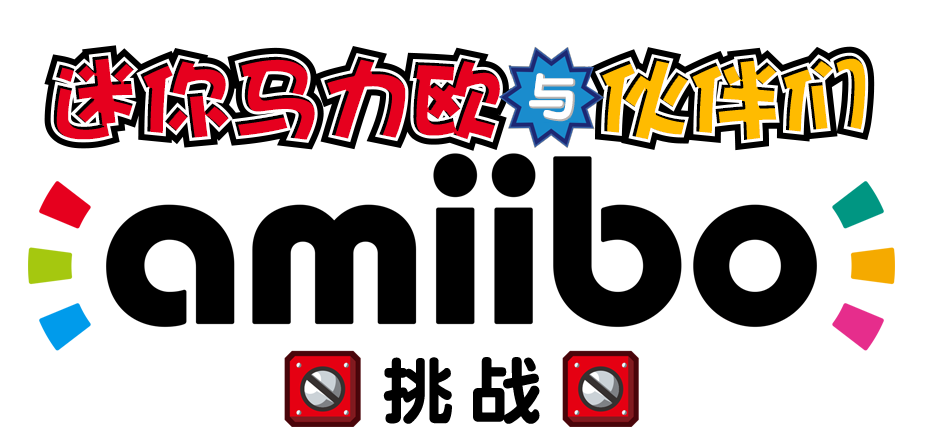
<style>
.page{position:relative;width:932px;height:442px;background:#ffffff}
.page>*{position:absolute;margin:0}
.t1{font:94.7px "DFPHaiBaoW12";letter-spacing:-0.045em;color:#e6001e}
.t2{font:94.7px "DFPHaiBaoW12";letter-spacing:-0.045em;color:#ffbb00}
.t3{font:50.7px "DFPYuanW9";letter-spacing:-0.07em;color:#ffffff}
.t4{font:73.3px "DFPYuanW9";letter-spacing:0.2em;color:#000000}
</style>
<div class="page">
<p class="t1" style="left:53px;top:55px;width:447px;height:85px">迷你马力欧</p>
<p class="t2" style="left:599px;top:55px;width:267px;height:85px">伙伴们</p>
<p class="t3" style="left:529px;top:73px;width:45px;height:47px">与</p>
<p class="t4" style="left:383px;top:357px;width:157px;height:67px">挑战</p>
</div>
